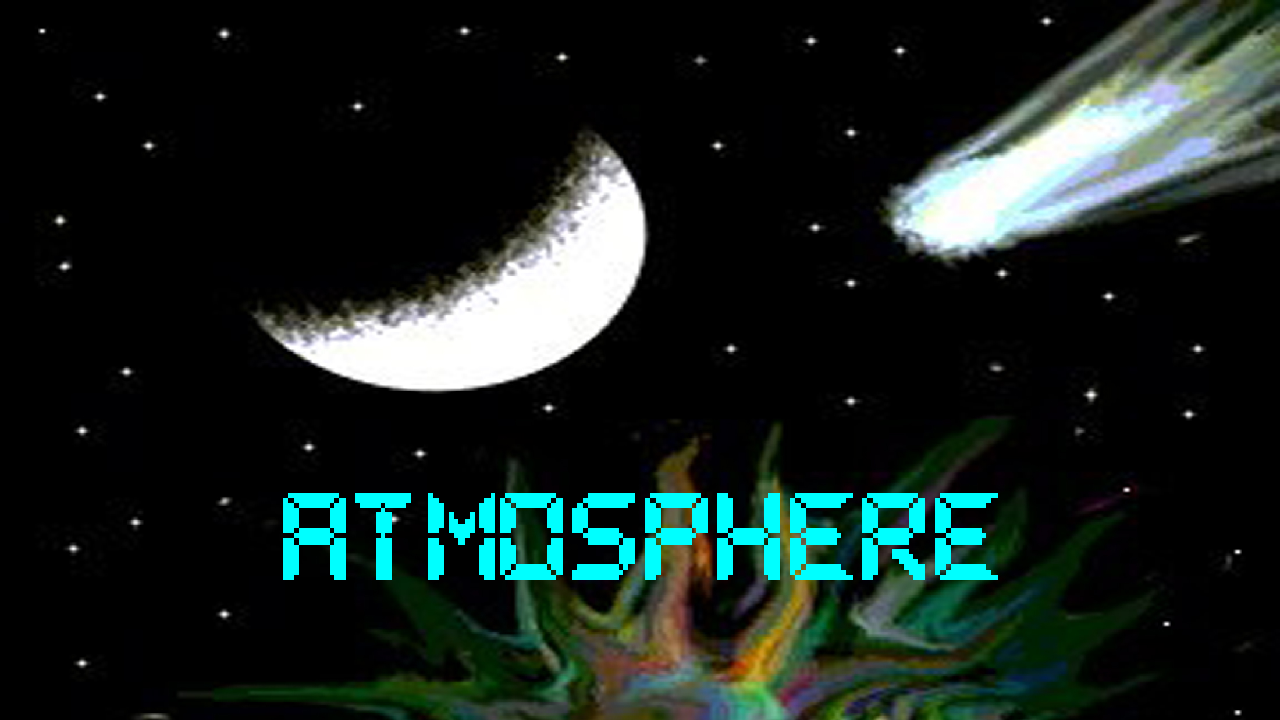
<style>
.page{position:relative;width:1280px;height:720px;background:#000000}
.page>*{position:absolute;margin:0}
.t1{font:103px "Pixel LCD-7";color:#00ffff}
</style>
<div class="page">
<p class="t1" style="left:283px;top:493px;width:715px;height:87px">Atmosphere</p>
</div>
